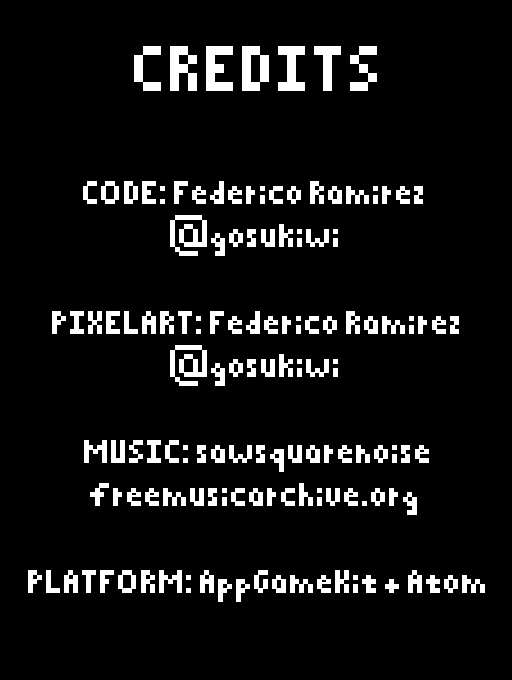
<style>
.page{position:relative;width:512px;height:680px;background:#000000}
.page>*{position:absolute;margin:0}
.t1{font:72px "Pixelated";color:#ffffff}
.t2{font:36px "Pixelated";color:#ffffff}
</style>
<div class="page">
<p class="t1" style="left:134px;top:46px;width:243px;height:45px">CREDITS</p>
<p class="t2" style="left:28px;top:181px;width:457px;height:421px;text-align:center">CODE: Federico Ramirez <br>@gosukiwi<br><br>PIXELART: Federico Ramirez<br>@gosukiwi<br><br>MUSIC: sawsquarenoise<br>freemusicarchive.org<br><br>PLATFORM: AppGameKit + Atom</p>
</div>
